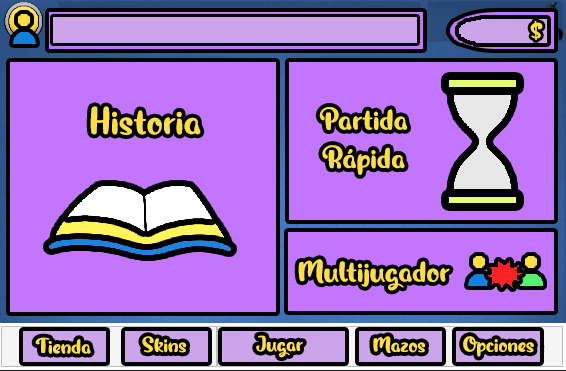
<style>
.page{position:relative;width:566px;height:371px;background:#c276fd}
.page>*{position:absolute;margin:0}
.t1{font:24.4px "MagicOwl-PersonalUse";color:#ffde43}
.t2{font:40px "MagicOwl-PersonalUse";color:#ffde43}
.t3{font:32px "MagicOwl-PersonalUse";color:#ffde43}
.t4{font:22.2px "MagicOwl-PersonalUse";color:#ffde43}
</style>
<div class="page">
<p class="t1" style="left:530px;top:20px;width:13px;height:20px">$</p>
<p class="t2" style="left:90px;top:106px;width:111px;height:29px">Historia</p>
<p class="t3" style="left:319px;top:107px;width:88px;height:68px;text-align:center">Partida<br>Rápida</p>
<p class="t3" style="left:298px;top:259px;width:152px;height:32px">Multijugador</p>
<p class="t4" style="left:35px;top:337px;width:56px;height:17px">Tienda</p>
<p class="t4" style="left:142px;top:336px;width:45px;height:17px">Skins</p>
<p class="t4" style="left:256px;top:335px;width:47px;height:23px">Jugar</p>
<p class="t4" style="left:373px;top:336px;width:52px;height:17px">Mazos</p>
<p class="t4" style="left:463px;top:336px;width:71px;height:21px">Opciones</p>
</div>
